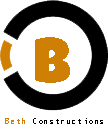
<style>
.page{position:relative;width:108px;height:130px;background:#ffffff}
.page>*{position:absolute;margin:0}
.t1{font:62.9px "LuckiestGuy-Regular";letter-spacing:-0.15em;color:#d07f05}
.t2{font:9.1px "OCRB10PitchBT-Regular";color:#000000}
.t3{font:9.1px "OCRB10PitchBT-Regular";color:#d07f05}
</style>
<div class="page">
<p class="t1" style="left:35px;top:37px;width:35px;height:46px">b</p>
<p class="t2" style="left:5px;top:118px;width:98px;height:6px"><span class="t3">Beth </span>Constructions</p>
</div>
